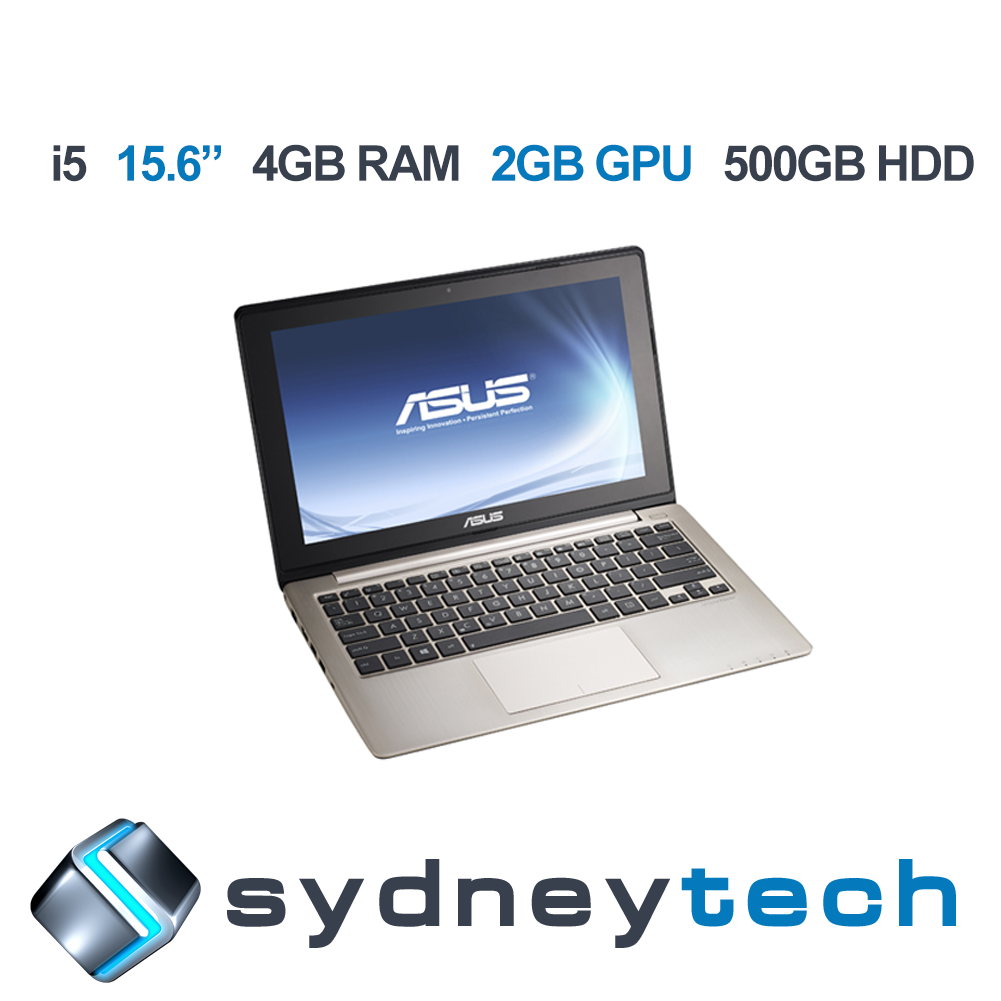
<style>
.page{position:relative;width:1001px;height:1001px;background:#ffffff}
.page>*{position:absolute;margin:0}
.t1{font:49.6px "Arial-BoldMT";letter-spacing:-0.05em;color:#37404c}
.t2{font:49.6px "Arial-BoldMT";letter-spacing:-0.05em;color:#0479bb}
</style>
<div class="page">
<p class="t1" style="left:53px;top:145px;width:34px;height:37px">i5</p>
<p class="t2" style="left:118px;top:145px;width:103px;height:37px">15.6”</p>
<p class="t1" style="left:252px;top:144px;width:207px;height:38px">4GB RAM</p>
<p class="t2" style="left:491px;top:144px;width:200px;height:38px">2GB GPU</p>
<p class="t1" style="left:724px;top:144px;width:250px;height:38px">500GB HDD</p>
</div>
